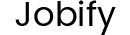
<style>
.page{position:relative;width:130px;height:35px;background:#ffffff}
.page>*{position:absolute;margin:0}
.t1{font:34px "Poppins-Regular";color:#000000}
</style>
<div class="page">
<p class="t1" style="left:15px;top:0px;width:101px;height:35px">Jobify</p>
</div>
